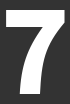
<style>
.page{position:relative;width:70px;height:104px;background:#333333}
.page>*{position:absolute;margin:0}
.t1{font:130.9px "SourceSansPro-Bold";letter-spacing:-0.05em;color:#ffffff}
</style>
<div class="page">
<p class="t1" style="left:6px;top:10px;width:59px;height:84px">7</p>
</div>
